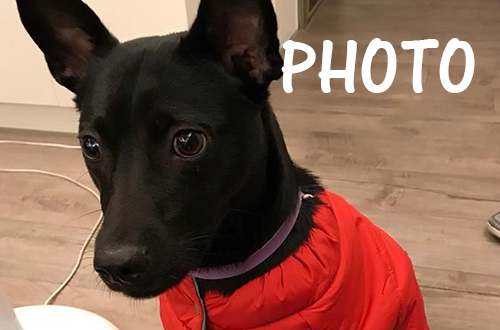
<style>
.page{position:relative;width:500px;height:330px}
.page>*{position:absolute;margin:0}
.t1{font:80px "ARCENA";color:#ffffff}
</style>
<div class="page">
<p class="t1" style="left:281px;top:38px;width:194px;height:55px">PHOTO</p>
</div>
